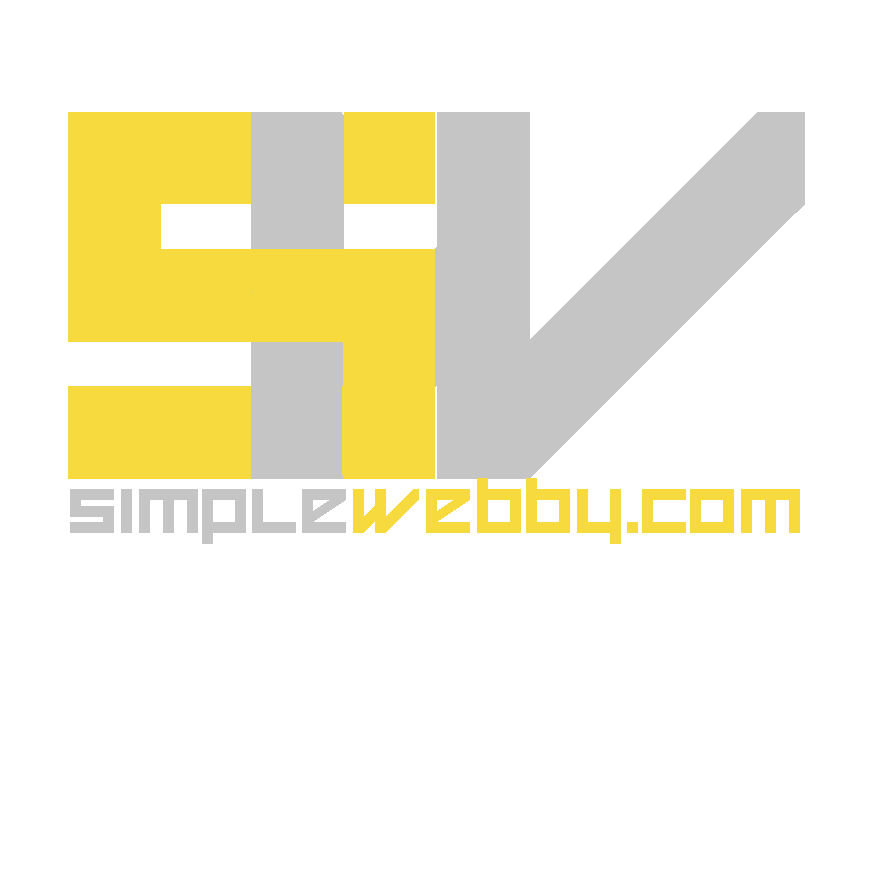
<style>
.page{position:relative;width:870px;height:870px;background:#ffffff}
.page>*{position:absolute;margin:0}
.t1{font:458.3px "HappyKiller";color:#f7db3e}
.t2{font:458.3px "HappyKiller";color:#c5c5c5}
.t3{font:54.8px "HappyKiller";color:#f7db3e}
.t4{font:54.8px "HappyKiller";color:#c5c5c5}
</style>
<div class="page">
<p class="t1" style="left:68px;top:112px;width:367px;height:367px">s</p>
<p class="t2" style="left:251px;top:112px;width:554px;height:367px">w</p>
<p class="t3" style="left:70px;top:478px;width:730px;height:66px"><span class="t4">simple</span>webby.com</p>
</div>
